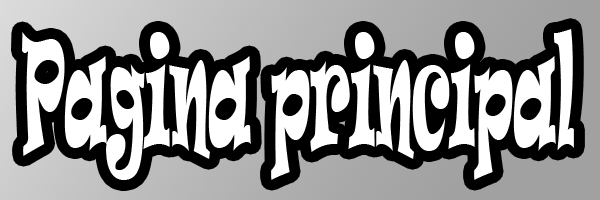
<style>
.page{position:relative;width:600px;height:200px;background:#000000}
.page>*{position:absolute;margin:0}
.t1{font:142.7px "Ravie";color:#ffffff;scale:0.35 1}
</style>
<div class="page">
<p class="t1" style="left:22px;top:29px;width:552px;height:151px">Pagina principal</p>
</div>
